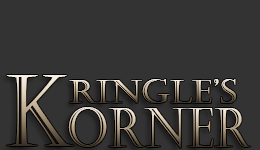
<style>
.page{position:relative;width:260px;height:150px;background:#333333}
.page>*{position:absolute;margin:0}
.t1{font:98.6px "Castellar";scale:0.84 1}
.t2{font:32.6px "Castellar";scale:1.08 1}
.t3{font:55.4px "Castellar";scale:0.85 1}
</style>
<div class="page">
<p class="t1" style="left:6px;top:75px;width:68px;height:71px">K</p>
<p class="t2" style="left:69px;top:79px;width:168px;height:24px">RINGLE’S</p>
<p class="t3" style="left:68px;top:107px;width:183px;height:41px">ORNER</p>
</div>
